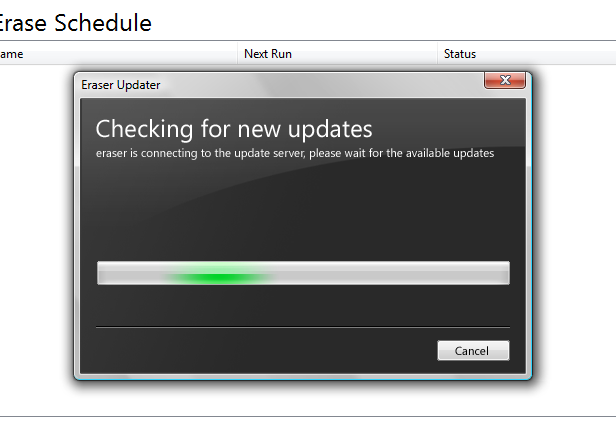
<style>
.page{position:relative;width:616px;height:425px;background:#ffffff}
.page>*{position:absolute;margin:0}
.t1{font:24.2px "SegoeUI";color:#ffffff}
.t2{font:11.6px "SegoeUI";color:#ffffff}
.t3{font:11.6px "SegoeUI";color:#000000}
</style>
<div class="page">
<p class="t1" style="left:96px;top:118px;width:276px;height:25px">Checking for new updates</p>
<p class="t2" style="left:96px;top:148px;width:398px;height:12px">eraser is connecting to the update server, please wait for the available updates</p>
<p class="t3" style="left:455px;top:346px;width:33px;height:9px">Cancel</p>
</div>
